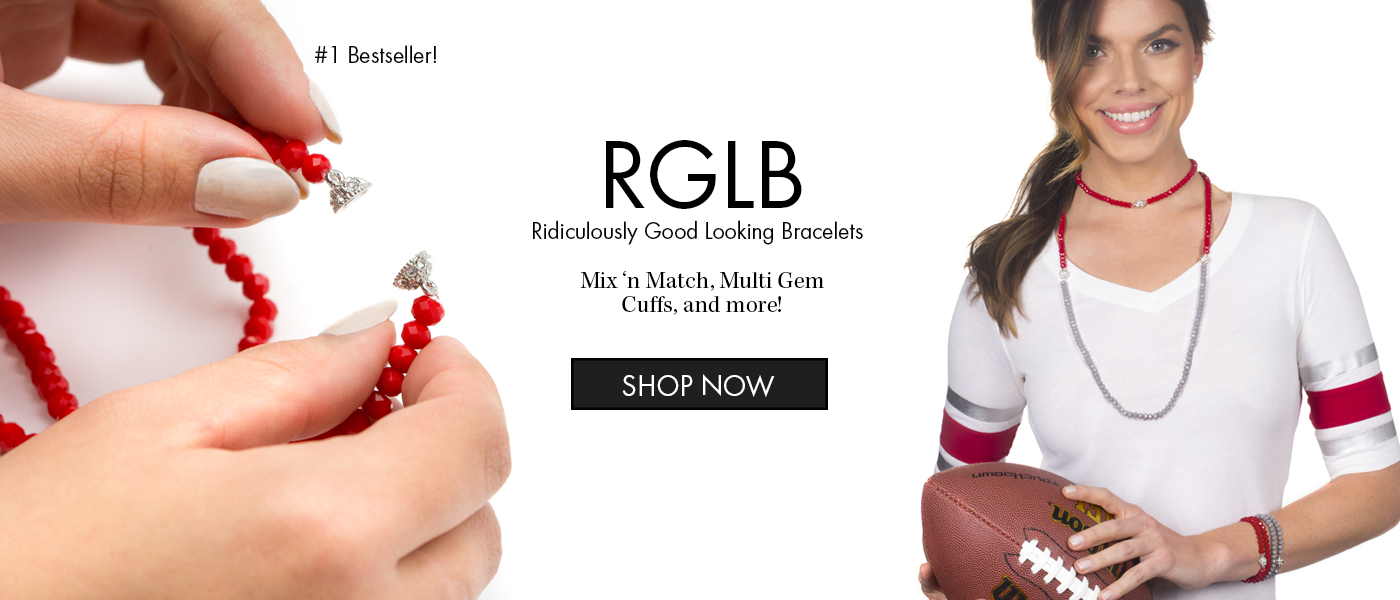
<style>
.page{position:relative;width:1400px;height:600px;background:#ffffff}
.page>*{position:absolute;margin:0}
.t1{font:24px "Futura-Boo";color:#000000}
.t2{font:100px "Futura-Boo";color:#000000}
.t3{font:24px/24px "KeplerStd-Regular";color:#000000}
.t4{font:30px "Futura-Boo";color:#ffffff}
</style>
<div class="page">
<p class="t1" style="left:315px;top:45px;width:121px;height:18px">#1 Bestseller!</p>
<p class="t2" style="left:606px;top:140px;width:196px;height:69px">RGLB</p>
<p class="t1" style="left:533px;top:220px;width:330px;height:25px">Ridiculously Good Looking Bracelets</p>
<p class="t3" style="left:580px;top:270px;width:244px;height:45px;text-align:center">Mix ‘n Match, Multi Gem Cuffs, and more!</p>
<p class="t4" style="left:622px;top:374px;width:153px;height:23px">SHOP NOW</p>
</div>
